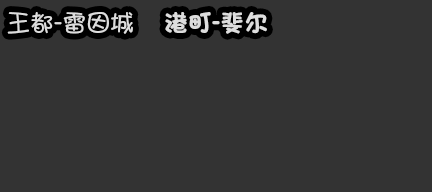
<style>
.page{position:relative;width:432px;height:192px;background:#333333}
.page>*{position:absolute;margin:0}
.t1{font:24px "MYoungHK-Medium";color:#dddddd}
.t2{font:24px "MYoungHKS-Xbold";color:#dddddd}
</style>
<div class="page">
<p class="t1" style="left:7px;top:12px;width:126px;height:22px">王都-雷因城</p>
<p class="t2" style="left:165px;top:12px;width:102px;height:22px">港町-斐尔</p>
</div>
